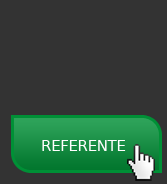
<style>
.page{position:relative;width:167px;height:184px;background:#333333}
.page>*{position:absolute;margin:0}
.t1{font:15px "BitstreamVeraSans-Roman";letter-spacing:-0.025em;color:#ffffff}
</style>
<div class="page">
<p class="t1" style="left:42px;top:140px;width:84px;height:11px">REFERENTE</p>
</div>
